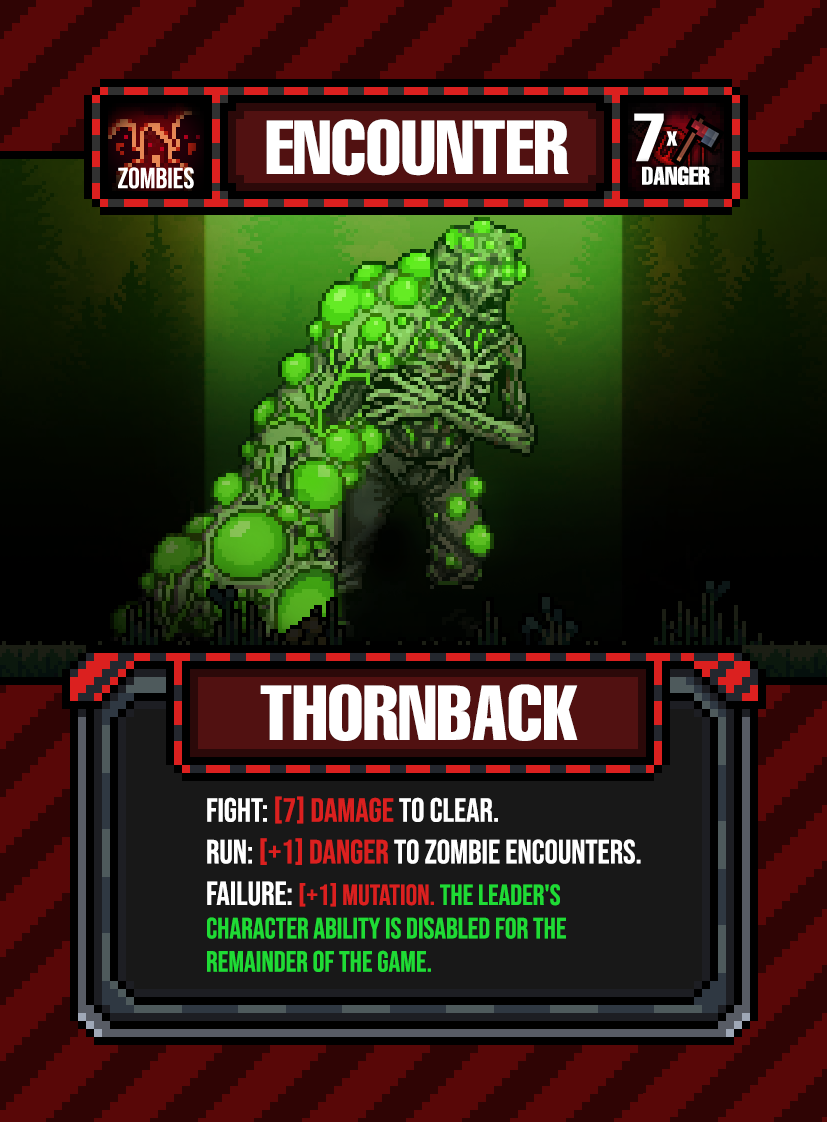
<style>
.page{position:relative;width:827px;height:1122px}
.page>*{position:absolute;margin:0}
.t1{font:75px "HelveticaLTPro-Compressed";color:#ffffff}
.t2{font:76.2px "HelveticaLTPro-Compressed";color:#ffffff}
.t3{font:29.2px/33.3px "BebasNeue-Regular";color:#1fdb35}
.t4{font:33.3px/41.7px "BebasNeue-Regular";color:#ffffff}
.t5{font:33.3px/41.7px "BebasNeue-Regular";color:#db201f}
.t6{font:33.3px/33.3px "BebasNeue-Regular";color:#db201f}
.t7{font:33.3px/33.3px "BebasNeue-Regular";color:#ffffff}
.t8{font:29.2px/41.7px "BebasNeue-Regular";color:#db201f}
</style>
<div class="page">
<p class="t1" style="left:266px;top:119px;width:303px;height:57px">ENCOUNTER</p>
<p class="t2" style="left:260px;top:684px;width:318px;height:57px">THORNBACK</p>
<p class="t3" style="left:207px;top:796px;width:434px;height:176px"><span class="t4">FIGHT: </span><span class="t5">[7] Damage</span><span class="t4"> to clear.<br>RUN: </span><span class="t6">[+1] Danger </span><span class="t7">to zombie encounters.<br></span><span class="t4">failure: </span><span class="t8">[+1] MUTATION. </span>The Leader's Character ability is disabled for the remainder of the game.</p>
</div>
